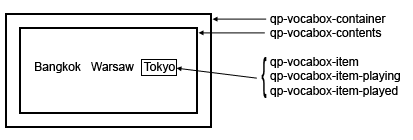
<style>
.page{position:relative;width:413px;height:140px;background:#ffffff}
.page>*{position:absolute;margin:0}
.t1{font:12px "ArialMT";color:#000000}
.t2{font:44.7px "ArialMT";color:#000000;scale:0.36 1}
</style>
<div class="page">
<p class="t1" style="left:270px;top:14px;width:130px;height:83px">qp-vocabox-container<br>qp-vocabox-contents<br><br>qp-vocabox-item<br>qp-vocabox-item-playing<br>qp-vocabox-item-played</p>
<p class="t1" style="left:35px;top:62px;width:140px;height:11px">Bangkok   Warsaw   Tokyo</p>
<p class="t2" style="left:261px;top:57px;width:6px;height:41px">{</p>
</div>
